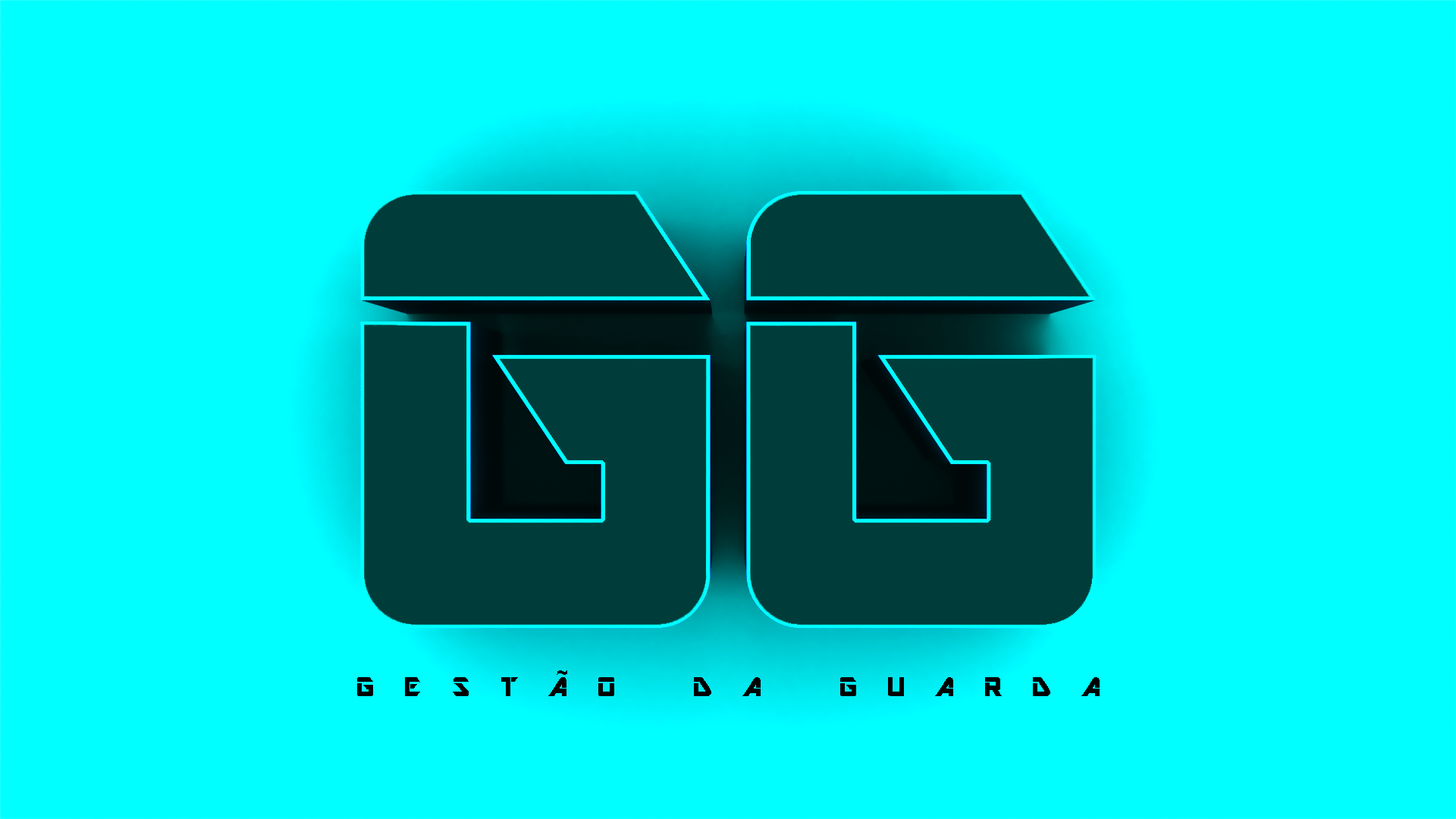
<style>
.page{position:relative;width:1456px;height:819px;background:#00ffff}
.page>*{position:absolute;margin:0}
.t1{font:30.3px "ARDESTINE";letter-spacing:1em;color:#000000;text-transform:uppercase}
</style>
<div class="page">
<p class="t1" style="left:357px;top:670px;width:743px;height:26px">Gestão da Guarda</p>
</div>
